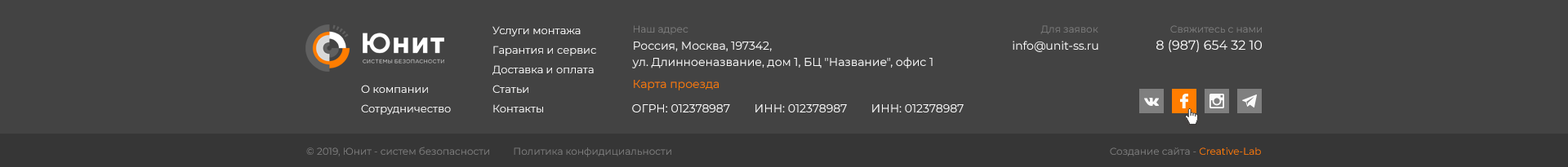
<style>
.page{position:relative;width:1568px;height:167px;background:#434343}
.page>*{position:absolute;margin:0}
.t1{font:10.6px/19.6px "Montserrat-Regular";color:#ffffff}
.t2{font:9.8px "Montserrat-Regular";color:#808080}
.t3{font:11.4px/16.3px "Montserrat-Regular";color:#fcfcfc}
.t4{font:11.4px "Montserrat-Regular";color:#fcfcfc}
.t5{font:13.1px "Montserrat-Regular";color:#fcfcfc}
.t6{font:11.4px "Montserrat-Regular";color:#ff7d00}
.t7{font:9.8px "Montserrat-Regular";color:#ff7d00}
</style>
<div class="page">
<p class="t1" style="left:492px;top:26px;width:104px;height:87px">Услуги монтажа<br>Гарантия и сервис<br>Доставка и оплата<br>Статьи<br>Контакты</p>
<p class="t2" style="left:634px;top:25px;width:54px;height:10px">Наш адрес</p>
<p class="t2" style="left:1040px;top:25px;width:58px;height:9px">Для заявок</p>
<p class="t2" style="left:1170px;top:25px;width:92px;height:8px">Свяжитесь с нами</p>
<p class="t3" style="left:632px;top:42px;width:301px;height:27px">Россия, Москва, 197342, <br>ул. Длинноеназвание, дом 1, БЦ "Название", офис 1</p>
<p class="t4" style="left:1013px;top:41px;width:85px;height:11px">info@unit-ss.ru</p>
<p class="t5" style="left:1156px;top:40px;width:106px;height:12px">8 (987) 654 32 10</p>
<p class="t1" style="left:361px;top:85px;width:90px;height:30px">О компании<br>Сотрудничество</p>
<p class="t6" style="left:634px;top:80px;width:85px;height:11px">Карта проезда</p>
<p class="t4" style="left:632px;top:105px;width:98px;height:8px">ОГРН: 012378987</p>
<p class="t4" style="left:755px;top:105px;width:92px;height:8px">ИНН: 012378987</p>
<p class="t4" style="left:872px;top:105px;width:92px;height:8px">ИНН: 012378987</p>
<p class="t2" style="left:306px;top:147px;width:183px;height:10px">© 2019, Юнит - систем безопасности</p>
<p class="t2" style="left:514px;top:148px;width:157px;height:10px">Политика конфидициальности</p>
<p class="t2" style="left:1110px;top:148px;width:151px;height:9px">Создание сайта - <span class="t7">Creative-Lab</span></p>
</div>
